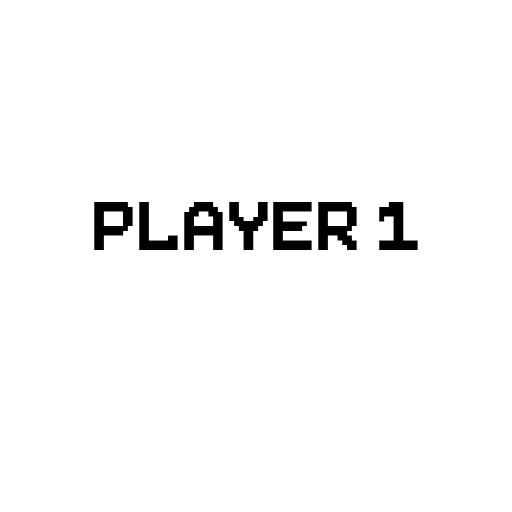
<style>
.page{position:relative;width:512px;height:512px;background:#ffffff}
.page>*{position:absolute;margin:0}
.t1{font:96px "Pixeboy";color:#000000}
</style>
<div class="page">
<p class="t1" style="left:94px;top:202px;width:324px;height:48px">Player 1</p>
</div>
